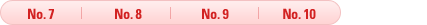
<style>
.page{position:relative;width:427px;height:25px;background:#ffffff}
.page>*{position:absolute;margin:0}
.t1{font:14px "Univeconbol";letter-spacing:-0.025em;color:#d22222}
</style>
<div class="page">
<p class="t1" style="left:28px;top:8px;width:26px;height:11px">No. 7</p>
<p class="t1" style="left:115px;top:8px;width:27px;height:11px">No. 8</p>
<p class="t1" style="left:202px;top:8px;width:27px;height:11px">No. 9</p>
<p class="t1" style="left:283px;top:8px;width:33px;height:11px">No. 10</p>
</div>
